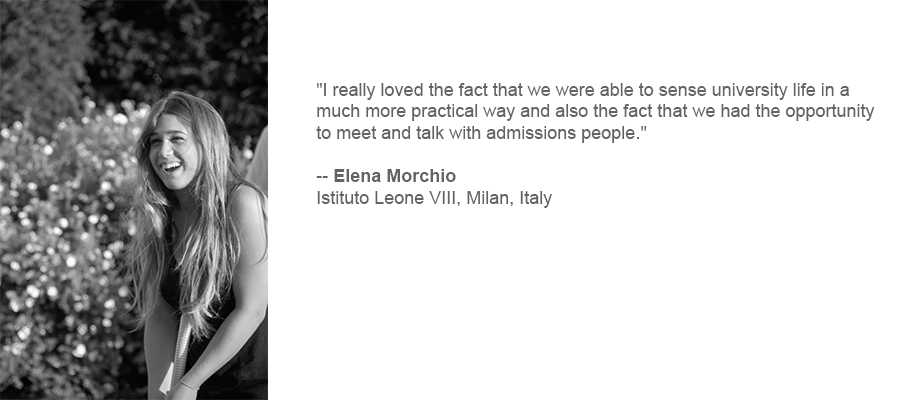
<style>
.page{position:relative;width:900px;height:400px;background:#ffffff}
.page>*{position:absolute;margin:0}
.t1{font:18px "ArialMT";color:#636363}
.t2{font:18px "Arial-BoldMT";color:#636363}
</style>
<div class="page">
<p class="t1" style="left:316px;top:83px;width:559px;height:125px">"I really loved the fact that we were able to sense university life in a much more practical way and also the fact that we had the opportunity to meet and talk with admissions people." <br><br>-- <span class="t2">Elena Morchio<br></span>Istituto Leone VIII, Milan, Italy</p>
</div>
